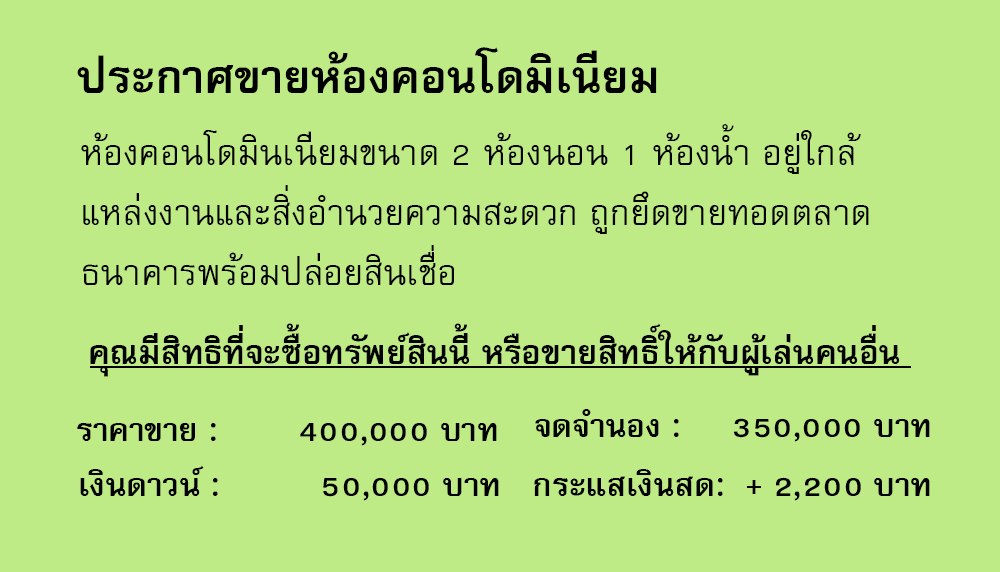
<style>
.page{position:relative;width:1000px;height:572px;background:#beeb85}
.page>*{position:absolute;margin:0}
.t1{font:64px "FreesiaUPCBold";color:#000000}
.t2{font:50px/60px "FreesiaUPC";color:#000000}
.t3{font:47px "FreesiaUPCBold";color:#000000}
.t4{font:45px "FreesiaUPCBold";color:#000000}
</style>
<div class="page">
<p class="t1" style="left:77px;top:47px;width:580px;height:46px">ประกาศขายห้องคอนโดมิเนียม</p>
<p class="t2" style="left:81px;top:124px;width:788px;height:161px">ห้องคอนโดมินเนียมขนาด 2 ห้องนอน 1 ห้องน้ำ อยู่ใกล้<br>แหล่งงานและสิ่งอำนวยความสะดวก ถูกยึดขายทอดตลาด<br>ธนาคารพร้อมปล่อยสินเชื่อ</p>
<p class="t3" style="left:90px;top:323px;width:810px;height:54px">คุณมีสิทธิที่จะซื้อทรัพย์สินนี้ หรือขายสิทธิ์ให้กับผู้เล่นคนอื่น</p>
<p class="t4" style="left:535px;top:409px;width:395px;height:33px">จดจำนอง :     350,000 บาท</p>
<p class="t4" style="left:77px;top:423px;width:420px;height:23px">ราคาขาย :        400,000 บาท</p>
<p class="t4" style="left:80px;top:465px;width:419px;height:36px">เงินดาวน์ :          50,000 บาท</p>
<p class="t4" style="left:534px;top:469px;width:396px;height:32px">กระแสเงินสด:  + 2,200 บาท</p>
</div>
